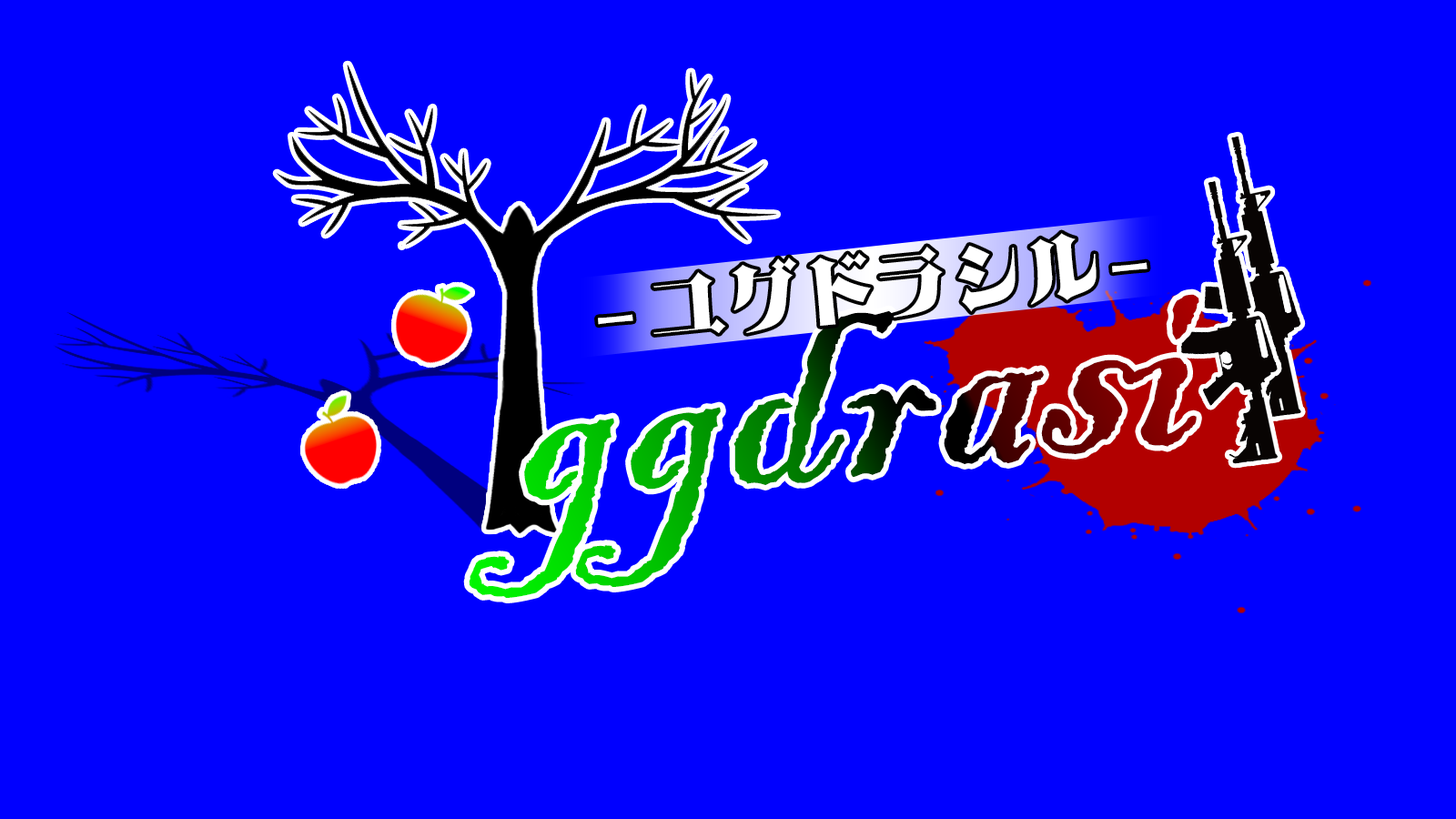
<style>
.page{position:relative;width:1456px;height:819px;background:#0000ff}
.page>*{position:absolute;margin:0}
.t1{font:75.8px "AB-doramin";letter-spacing:-0.01em;color:#ffffff}
.t2{font:56.9px "AB-doramin";letter-spacing:-0.01em;color:#ffffff}
.t3{font:303.3px "BlackadderITC-Regular";letter-spacing:-0.01em}
</style>
<div class="page">
<p class="t1" style="left:598px;top:233px;width:549px;height:101px;rotate:-6deg"><span class="t2">-</span>ユグドラシル <span class="t2">-</span></p>
<p class="t3" style="left:469px;top:294px;width:730px;height:304px;rotate:-6deg">ggdrasi</p>
</div>
